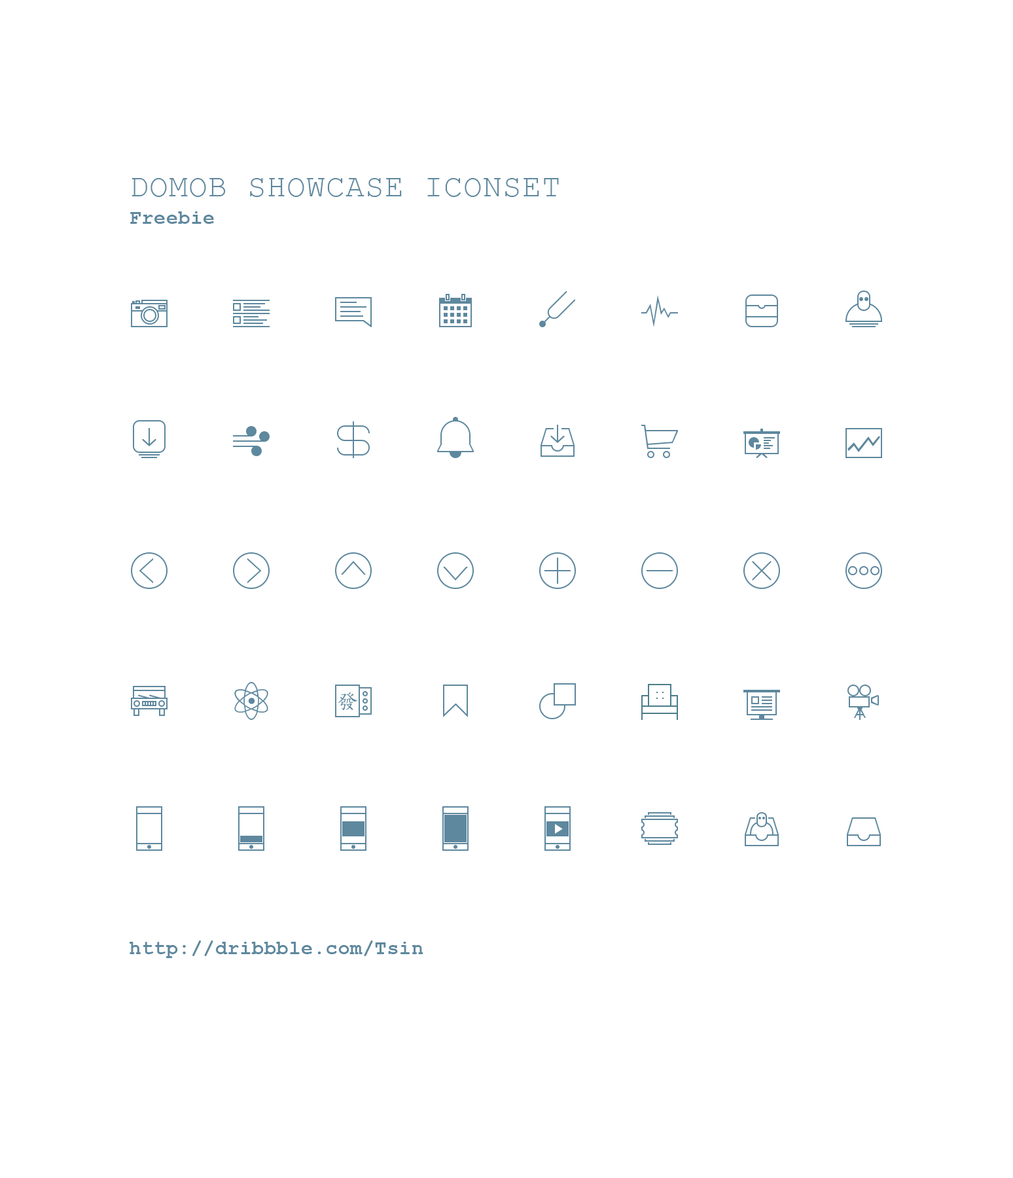
<style>
.page{position:relative;width:1013px;height:1178px;background:#ffffff}
.page>*{position:absolute;margin:0}
.t1{font:31.4px/27.5px "CourierNewPSMT";letter-spacing:0.025em;color:#5e889e}
.t2{font:19.6px/27.5px "CourierNewPS-BoldMT";letter-spacing:0.025em;color:#5e889e}
.t3{font:19.6px "CourierNewPS-BoldMT";letter-spacing:0.025em;color:#5e889e}
</style>
<div class="page">
<p class="t1" style="left:130px;top:178px;width:429px;height:46px">DOMOB SHOWCASE ICONSET  <br><span class="t2">Freebie</span></p>
<p class="t3" style="left:129px;top:940px;width:294px;height:18px">http://dribbble.com/Tsin</p>
</div>
